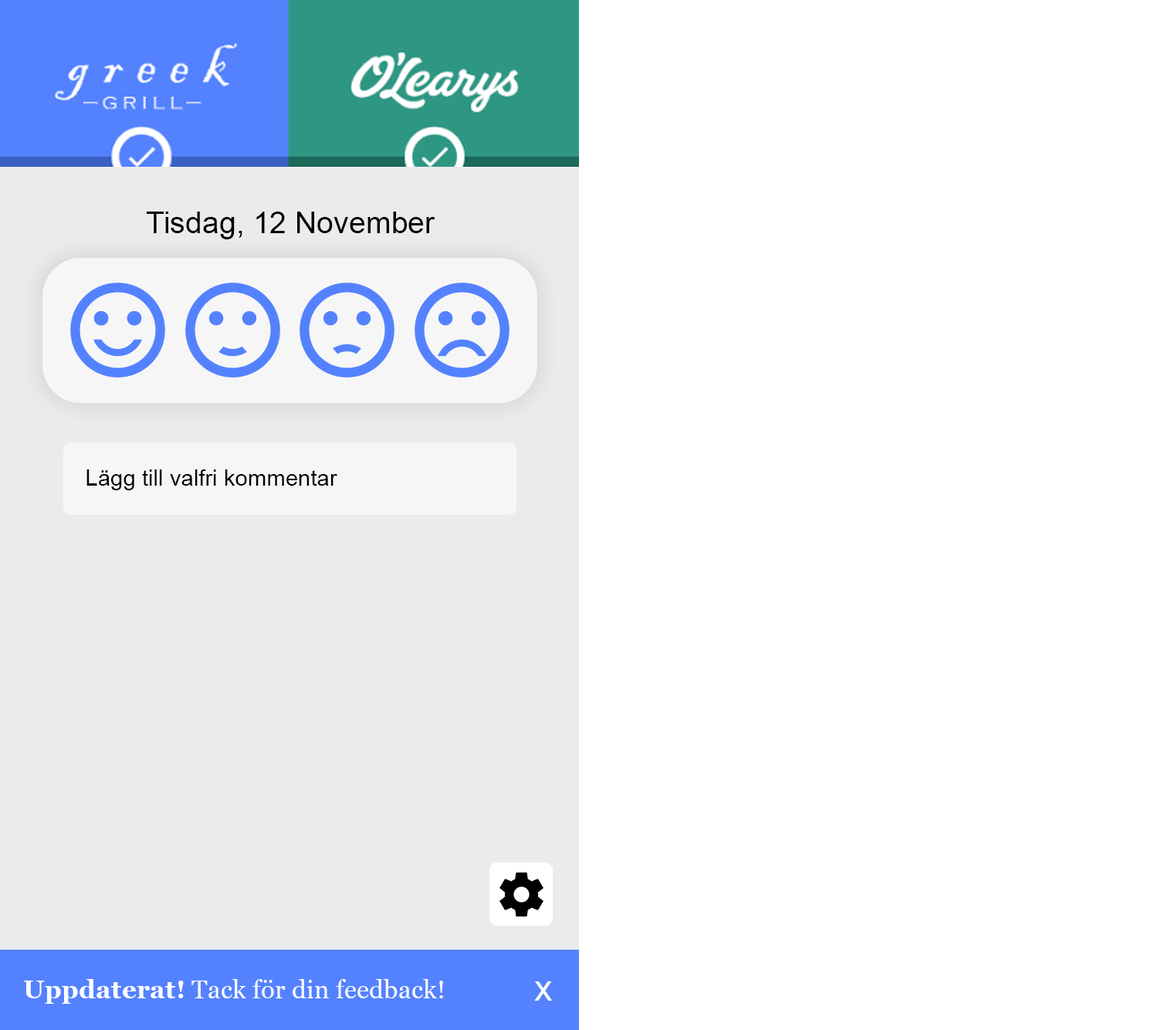
<style>
.page{position:relative;width:1158px;height:1030px;background:#ffffff}
.page>*{position:absolute;margin:0}
.t1{font:30.3px "ArialMT";color:#000000}
.t2{font:22.7px "ArialMT";color:#000000}
.t3{font:25.9px "Georgia";color:#ffffff}
.t4{font:25.9px "Georgia-Bold";color:#ffffff}
.t5{font:36.3px "ArialMT";color:#ffffff}
</style>
<div class="page">
<p class="t1" style="left:146px;top:212px;width:289px;height:27px">Tisdag, 12 November</p>
<p class="t2" style="left:86px;top:469px;width:251px;height:21px">Lägg till valfri kommentar</p>
<p class="t3" style="left:23px;top:979px;width:420px;height:25px"><span class="t4">Uppdaterat!</span> Tack för din feedback!</p>
<p class="t5" style="left:534px;top:981px;width:18px;height:19px">x</p>
</div>
